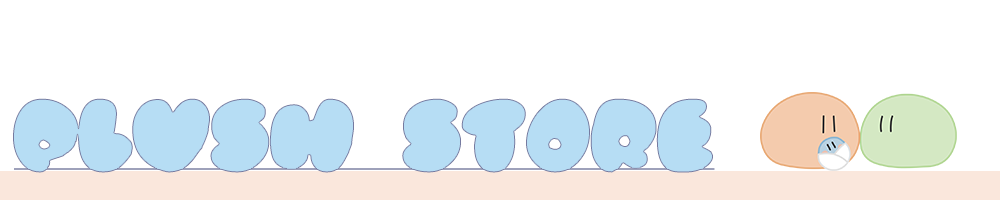
<style>
.page{position:relative;width:1000px;height:200px;background:#ffffff}
.page>*{position:absolute;margin:0}
.t1{font:71.7px "Rubberneck";color:#b6ddf4;font-weight:bold;text-decoration:underline}
</style>
<div class="page">
<p class="t1" style="left:13px;top:98px;width:702px;height:75px">Plush Store</p>
</div>
